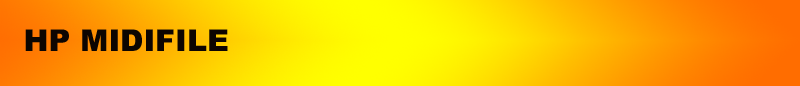
<style>
.page{position:relative;width:800px;height:86px}
.page>*{position:absolute;margin:0}
.t1{font:30px "Arial-Black";color:#0d0501}
</style>
<div class="page">
<p class="t1" style="left:25px;top:29px;width:203px;height:22px">HP MIDIFILE</p>
</div>
